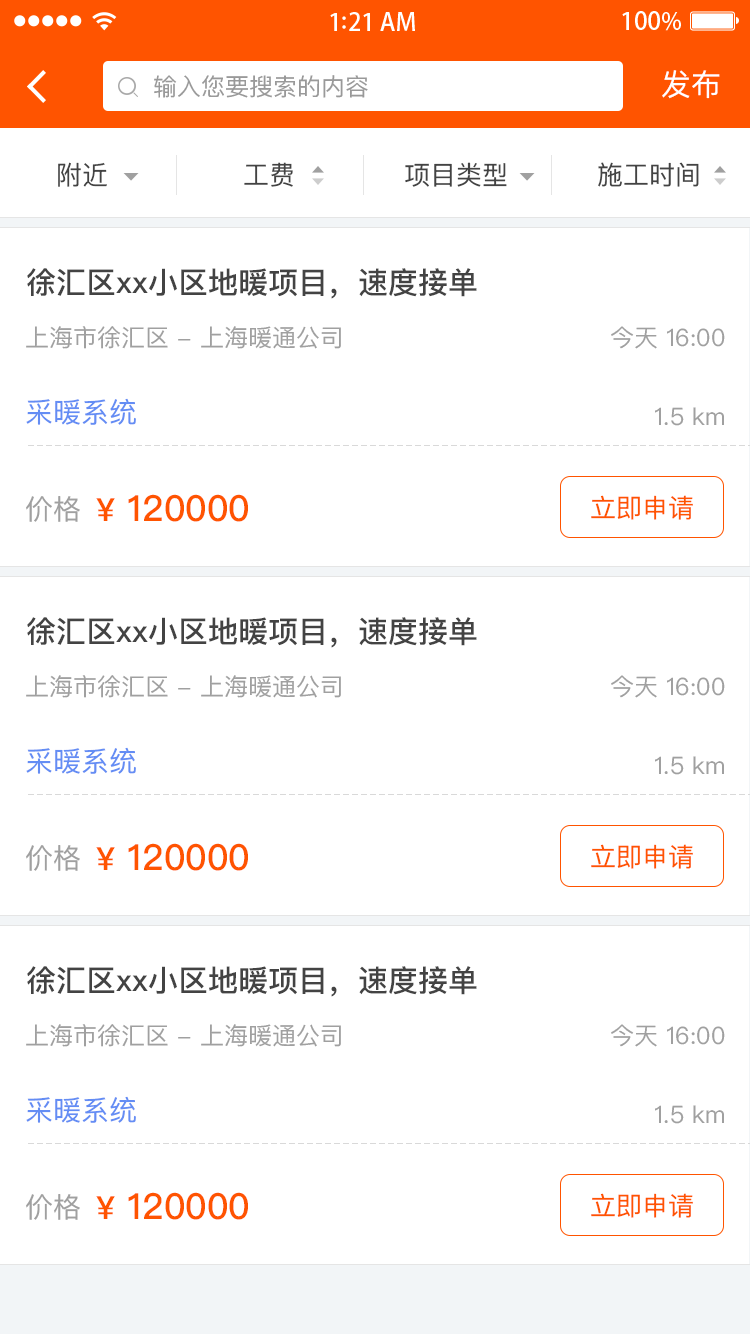
<style>
.page{position:relative;width:750px;height:1334px;background:#ffffff}
.page>*{position:absolute;margin:0}
.t1{font:24px "PingFangSC-Regular";color:#999999}
.t2{font:30px "PingFangSC-Regular";color:#ffffff}
.t3{font:26px "PingFangSC-Regular";color:#434343}
.t4{font:30px "PingFangSC-Medium";color:#434343}
.t5{font:24px "PingFangSC-Regular";color:#a0a0a0}
.t6{font:28px "PingFangSC-Regular";color:#648df4}
.t7{font:28px "PingFangSC-Regular";color:#a0a0a0}
.t8{font:36px "PingFangSC-Medium";color:#ff5400}
.t9{font:32px "PingFangSC-Medium";color:#ff5400}
.t10{font:26px "PingFangSC-Regular";color:#ff5400}
</style>
<div class="page">
<p class="t1" style="left:154px;top:75px;width:214px;height:23px">输入您要搜索的内容</p>
<p class="t2" style="left:662px;top:70px;width:58px;height:29px">发布</p>
<p class="t3" style="left:58px;top:162px;width:49px;height:25px">附近</p>
<p class="t3" style="left:244px;top:162px;width:49px;height:25px">工费</p>
<p class="t3" style="left:405px;top:162px;width:102px;height:25px">项目类型</p>
<p class="t3" style="left:598px;top:162px;width:101px;height:25px">施工时间</p>
<p class="t4" style="left:27px;top:268px;width:450px;height:31px">徐汇区xx小区地暖项目，速度接单</p>
<p class="t5" style="left:26px;top:326px;width:315px;height:23px">上海市徐汇区 - 上海暖通公司</p>
<p class="t5" style="left:611px;top:326px;width:114px;height:23px">今天 16:00</p>
<p class="t6" style="left:26px;top:398px;width:110px;height:27px">采暖系统</p>
<p class="t5" style="left:655px;top:407px;width:69px;height:19px">1.5 km</p>
<p class="t7" style="left:26px;top:496px;width:54px;height:26px">价格</p>
<p class="t8" style="left:96px;top:494px;width:152px;height:28px"><span class="t9">¥</span> 120000</p>
<p class="t10" style="left:591px;top:495px;width:102px;height:25px">立即申请</p>
<p class="t4" style="left:27px;top:617px;width:450px;height:31px">徐汇区xx小区地暖项目，速度接单</p>
<p class="t5" style="left:26px;top:675px;width:315px;height:23px">上海市徐汇区 - 上海暖通公司</p>
<p class="t5" style="left:611px;top:675px;width:114px;height:23px">今天 16:00</p>
<p class="t6" style="left:26px;top:747px;width:110px;height:27px">采暖系统</p>
<p class="t5" style="left:655px;top:756px;width:69px;height:19px">1.5 km</p>
<p class="t7" style="left:26px;top:845px;width:54px;height:26px">价格</p>
<p class="t8" style="left:96px;top:843px;width:152px;height:28px"><span class="t9">¥</span> 120000</p>
<p class="t10" style="left:591px;top:844px;width:102px;height:25px">立即申请</p>
<p class="t4" style="left:27px;top:966px;width:450px;height:31px">徐汇区xx小区地暖项目，速度接单</p>
<p class="t5" style="left:26px;top:1024px;width:315px;height:23px">上海市徐汇区 - 上海暖通公司</p>
<p class="t5" style="left:611px;top:1024px;width:114px;height:23px">今天 16:00</p>
<p class="t6" style="left:26px;top:1096px;width:110px;height:27px">采暖系统</p>
<p class="t5" style="left:655px;top:1105px;width:69px;height:19px">1.5 km</p>
<p class="t8" style="left:96px;top:1192px;width:152px;height:28px"><span class="t9">¥</span> 120000</p>
<p class="t10" style="left:591px;top:1193px;width:102px;height:25px">立即申请</p>
<p class="t7" style="left:26px;top:1194px;width:54px;height:26px">价格</p>
</div>
